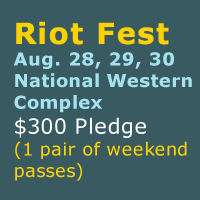
<style>
.page{position:relative;width:200px;height:200px;background:#395a61}
.page>*{position:absolute;margin:0}
.t1{font:18px "Verdana-Bold";letter-spacing:0.018em;color:#a3e2ee}
.t2{font:29px "Verdana-Bold";letter-spacing:0.018em;color:#fed200;font-weight:bold}
.t3{font:21px "Verdana";letter-spacing:0.018em;color:#fdfdfc}
.t4{font:18px "Verdana";letter-spacing:0.018em;color:#fed200}
</style>
<div class="page">
<p class="t1" style="left:13px;top:21px;width:179px;height:160px"><span class="t2">Riot Fest<br></span>Aug. 28, 29, 30<br>National Western<br>Complex<br><span class="t3">$300 Pledge<br></span><span class="t4">(1 pair of weekend<br>passes)</span></p>
</div>
